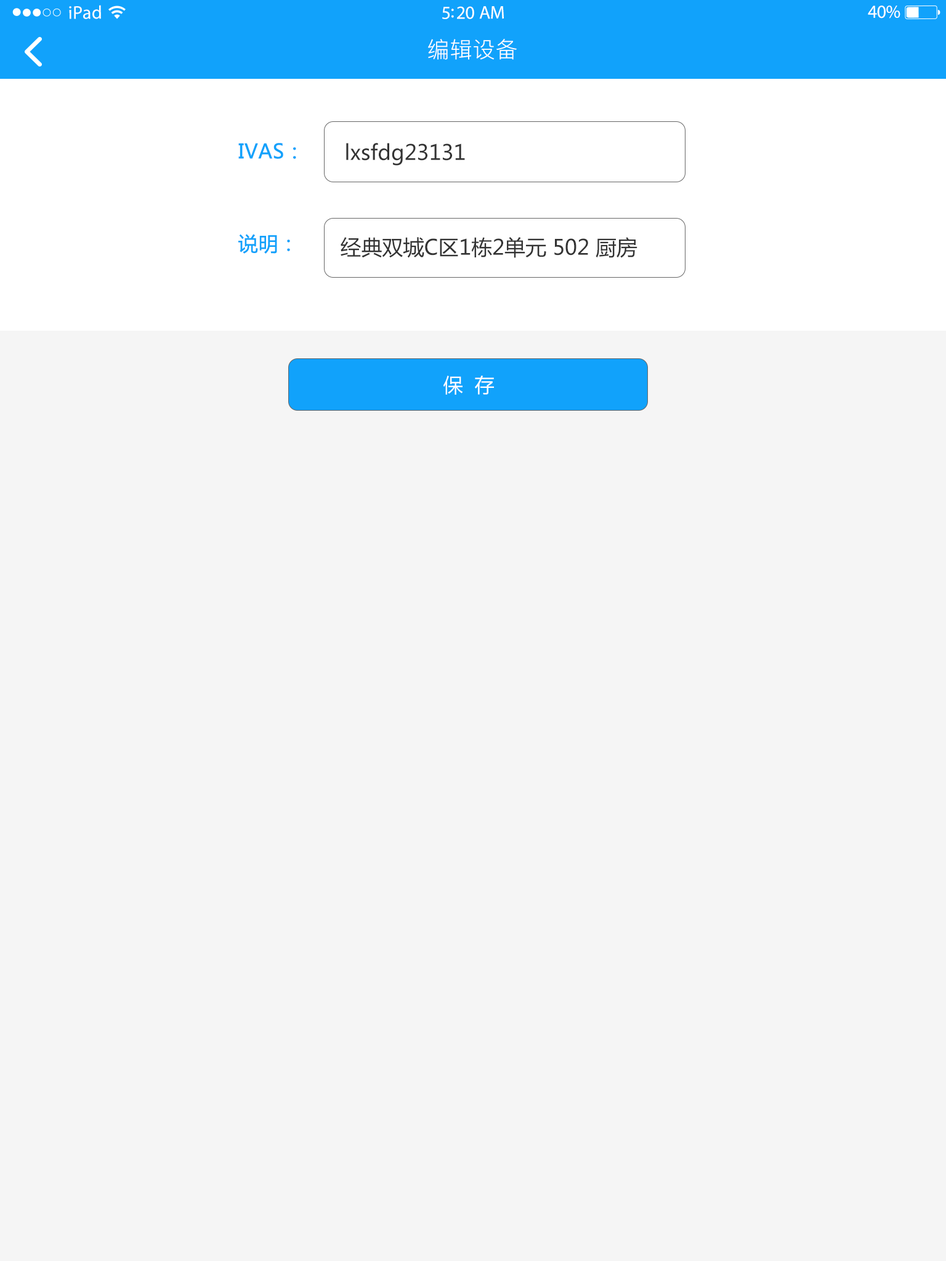
<style>
.page{position:relative;width:946px;height:1261px;background:#f5f5f5}
.page>*{position:absolute;margin:0}
.t1{font:18.5px "MyriadPro-Regular";letter-spacing:0.02em;color:#ffffff}
.t2{font:18.5px "MyriadPro-Regular";letter-spacing:-0.02em;color:#ffffff}
.t3{font:22.2px "PingFang-SC-Regular";letter-spacing:0.03em;color:#ffffff}
.t4{font:19.7px/46.2px "MicrosoftYaHei";color:#11a2fb;font-weight:bold}
.t5{font:20.9px "MicrosoftYaHei";color:#333333}
.t6{font:19.7px "MicrosoftYaHei";color:#ffffff}
</style>
<div class="page">
<p class="t1" style="left:69px;top:5px;width:32px;height:14px">iPad</p>
<p class="t2" style="left:867px;top:6px;width:33px;height:12px">40%</p>
<p class="t2" style="left:442px;top:6px;width:62px;height:13px">5:20 AM</p>
<p class="t3" style="left:428px;top:39px;width:89px;height:21px">编辑设备</p>
<p class="t4" style="left:238px;top:143px;width:58px;height:111px">IVAS：<br><br>说明：</p>
<p class="t5" style="left:346px;top:143px;width:119px;height:23px">lxsfdg23131</p>
<p class="t5" style="left:340px;top:237px;width:297px;height:21px">经典双城C区1栋2单元 502 厨房</p>
<p class="t6" style="left:443px;top:376px;width:51px;height:19px">保  存</p>
</div>
